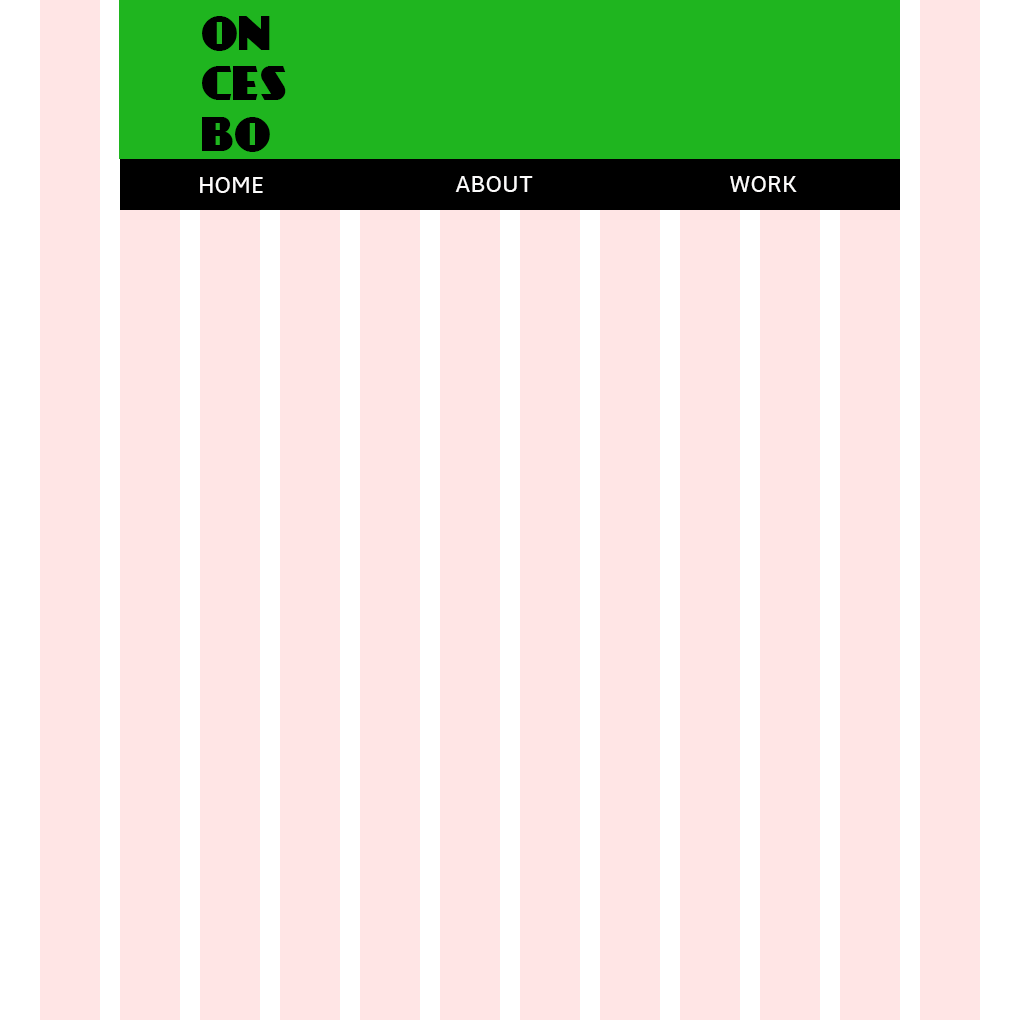
<style>
.page{position:relative;width:1020px;height:1020px;background:#ffe5e5}
.page>*{position:absolute;margin:0}
.t1{font:42px "DayPosterBlack";color:#000000}
.t2{font:24px "Amble-Regular";color:#fcfbfb}
</style>
<div class="page">
<p class="t1" style="left:202px;top:16px;width:84px;height:136px">ON<br>CES<br>BO</p>
<p class="t2" style="left:200px;top:177px;width:63px;height:16px">HOME</p>
<p class="t2" style="left:455px;top:176px;width:78px;height:16px">ABOUT</p>
<p class="t2" style="left:730px;top:176px;width:67px;height:16px">WORK</p>
</div>
